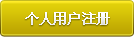
<style>
.page{position:relative;width:134px;height:37px}
.page>*{position:absolute;margin:0}
.t1{font:14px "SimSun";color:#ffffff;font-weight:bold}
</style>
<div class="page">
<p class="t1" style="left:25px;top:12px;width:85px;height:13px">个人用户注册</p>
</div>
